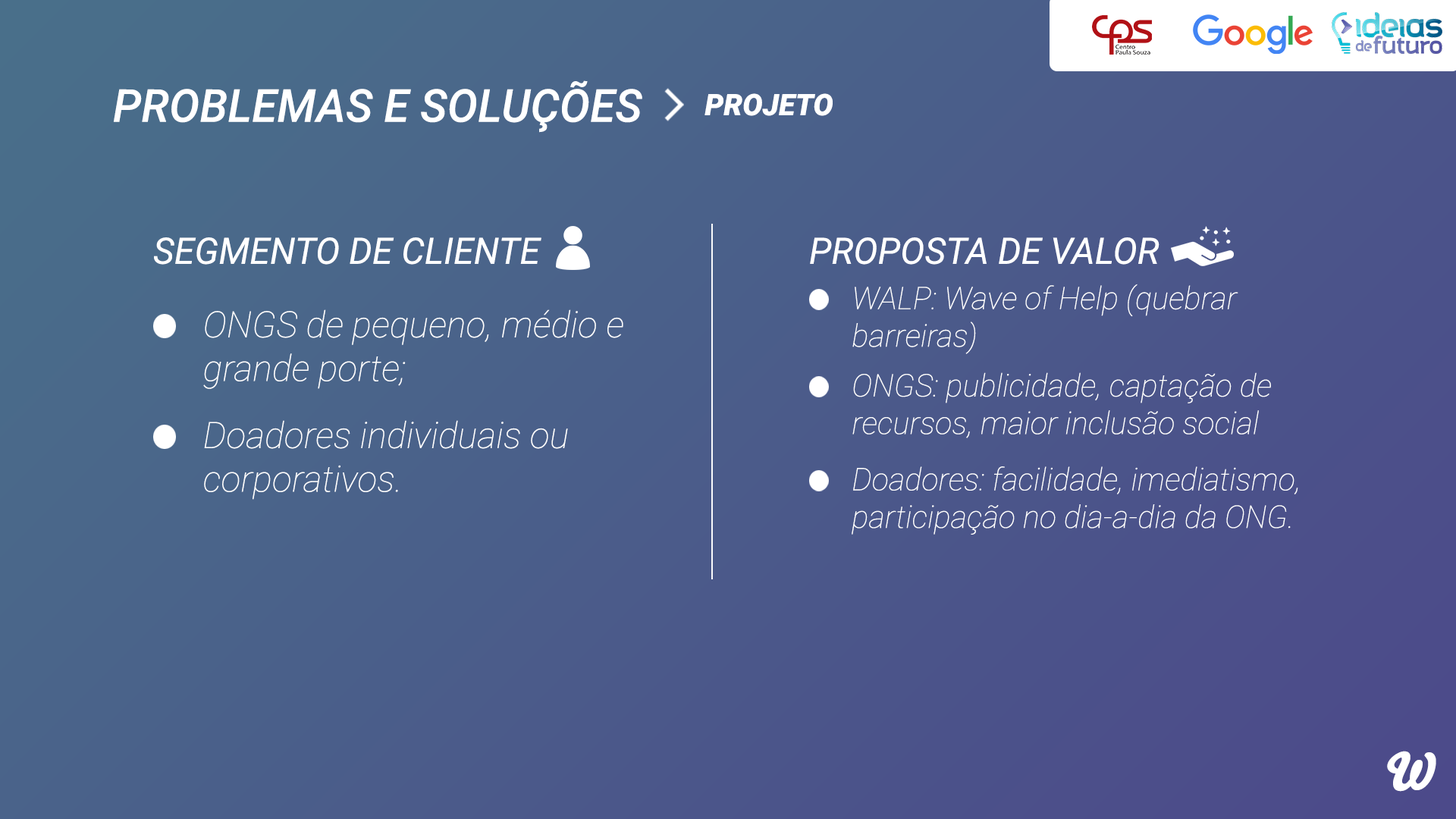
<style>
.page{position:relative;width:1456px;height:819px}
.page>*{position:absolute;margin:0}
.t1{font:45.5px "Roboto-MediumItalic";color:#ffffff}
.t2{font:29.7px "Roboto-BlackItalic";color:#ffffff}
.t3{font:36.4px "Roboto-Italic";color:#ffffff}
.t4{font:31.3px "Roboto-ThinItalic";color:#ffffff}
.t5{font:36.4px "Roboto-ThinItalic";color:#ffffff}
.t6{font:50.8px "Bello-Pro";color:#ffffff}
</style>
<div class="page">
<p class="t1" style="left:113px;top:80px;width:529px;height:53px">PROBLEMAS E SOLUÇÕES</p>
<p class="t2" style="left:704px;top:93px;width:129px;height:23px">PROJETO</p>
<p class="t3" style="left:154px;top:237px;width:387px;height:28px">SEGMENTO DE CLIENTE</p>
<p class="t3" style="left:810px;top:237px;width:349px;height:28px">PROPOSTA DE VALOR</p>
<p class="t4" style="left:852px;top:284px;width:386px;height:70px">WALP: Wave of Help (quebrar barreiras)</p>
<p class="t5" style="left:203px;top:309px;width:420px;height:80px">ONGS de pequeno, médio e grande porte;</p>
<p class="t4" style="left:852px;top:372px;width:419px;height:66px">ONGS: publicidade, captação de recursos, maior inclusão social</p>
<p class="t5" style="left:204px;top:420px;width:364px;height:80px">Doadores individuais ou corporativos.</p>
<p class="t4" style="left:852px;top:466px;width:446px;height:69px">Doadores: facilidade, imediatismo, participação no dia-a-dia da ONG.</p>
<p class="t6" style="left:1387px;top:751px;width:49px;height:41px">W</p>
</div>
